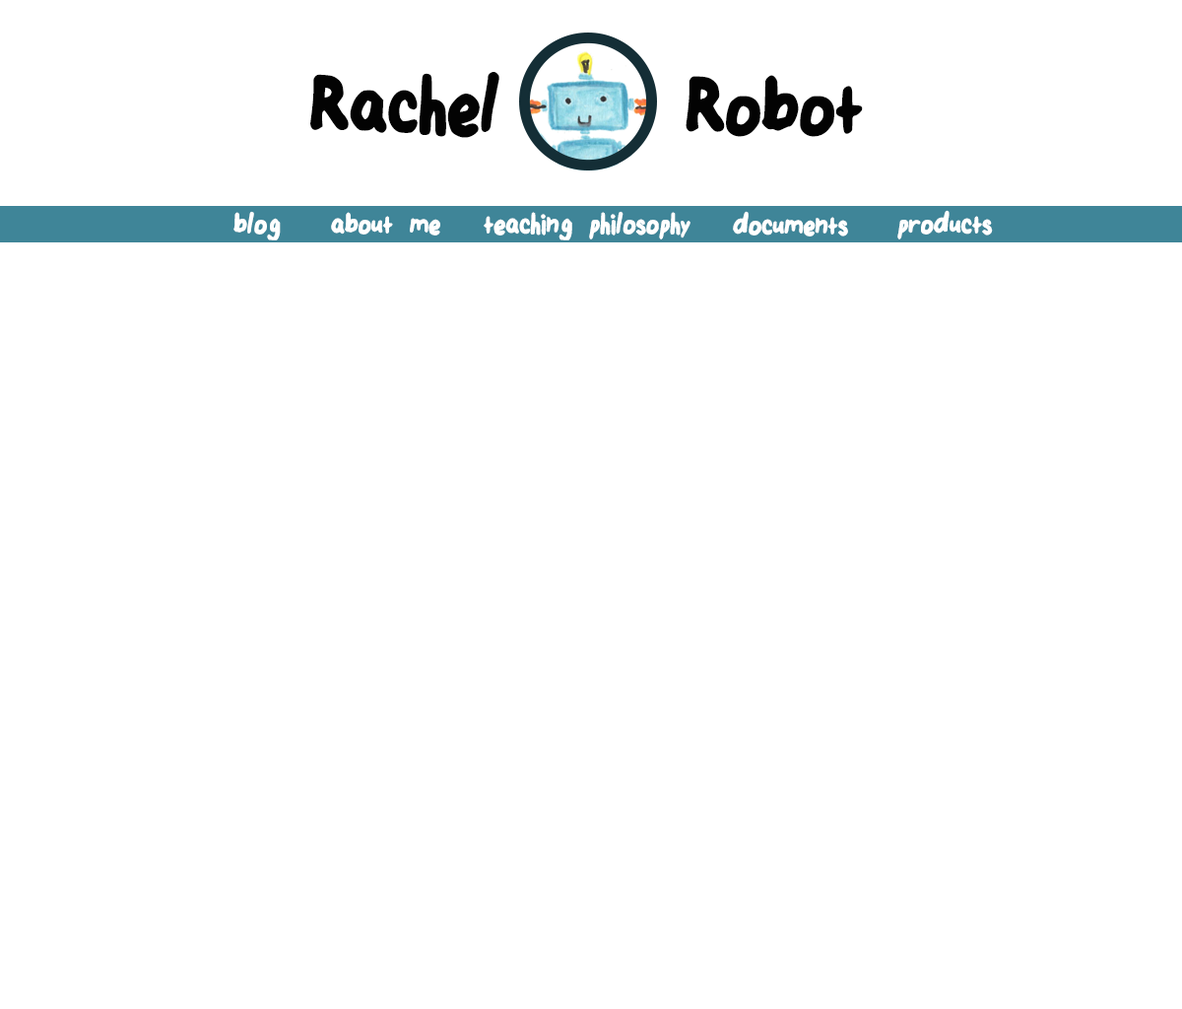
<style>
.page{position:relative;width:1182px;height:1009px;background:#ffffff}
.page>*{position:absolute;margin:0}
.t1{font:104.4px "MyFont";color:#030303;font-weight:bold}
.t2{font:37.4px "MyFont";color:#ffffff;font-weight:bold}
</style>
<div class="page">
<p class="t1" style="left:310px;top:72px;width:189px;height:66px">Rachel</p>
<p class="t1" style="left:686px;top:75px;width:177px;height:62px">Robot</p>
<p class="t2" style="left:897px;top:210px;width:96px;height:29px">products</p>
<p class="t2" style="left:233px;top:211px;width:48px;height:29px">blog</p>
<p class="t2" style="left:331px;top:212px;width:109px;height:23px">about me</p>
<p class="t2" style="left:484px;top:211px;width:207px;height:29px">teaching philosophy</p>
<p class="t2" style="left:733px;top:211px;width:115px;height:25px">documents</p>
</div>
